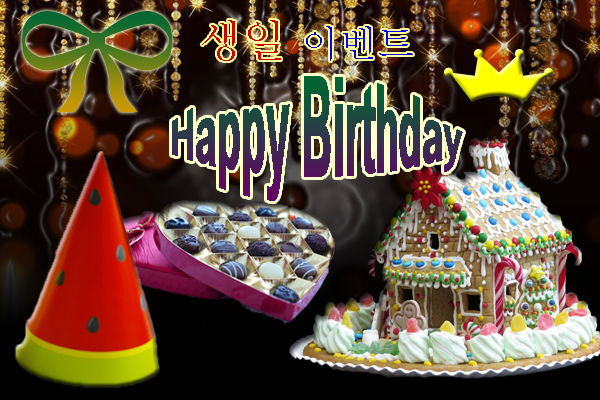
<style>
.page{position:relative;width:600px;height:400px}
.page>*{position:absolute;margin:0}
.t1{font:38px "Batang";color:#0000ff}
.t2{font:45px "Batang";color:#cc0000}
.t3{font:40px "Arial-BoldMT"}
</style>
<div class="page">
<p class="t1" style="left:202px;top:20px;width:211px;height:41px"><span class="t2">생일 </span>이벤트</p>
<p class="t3" style="left:172px;top:76px;width:291px;height:125px;text-align:center">Happy Birthday</p>
</div>
